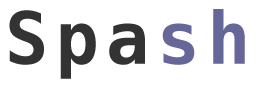
<style>
.page{position:relative;width:258px;height:90px;background:#ffffff}
.page>*{position:absolute;margin:0}
.t1{font:72px "Menlo-Bold";letter-spacing:0.1em;color:#333333}
.t2{font:72px "Menlo-Bold";letter-spacing:0.1em;color:#666699}
</style>
<div class="page">
<p class="t1" style="left:9px;top:9px;width:236px;height:70px">Spa<span class="t2">sh</span></p>
</div>
